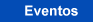
<style>
.page{position:relative;width:93px;height:22px;background:#034cb5}
.page>*{position:absolute;margin:0}
.t1{font:14px "Arial-BoldMT";color:#ffffff}
</style>
<div class="page">
<p class="t1" style="left:25px;top:5px;width:53px;height:11px">Eventos</p>
</div>
